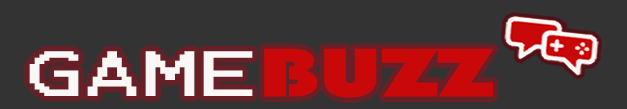
<style>
.page{position:relative;width:627px;height:109px;background:#333333}
.page>*{position:absolute;margin:0}
.t1{font:51.1px "Terminal";color:#fbf7f7;scale:1.52 1}
.t2{font:71px "Bauhaus93";color:#c90909;scale:1.52 1}
</style>
<div class="page">
<p class="t1" style="left:29px;top:48px;width:465px;height:50px">GAME<span class="t2">BUZZ</span></p>
</div>
